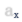
<style>
.page{position:relative;width:22px;height:22px;background:#ffffff}
.page>*{position:absolute;margin:0}
.t1{font:18px "SimSun-ExtB";color:#d3d3d3}
.t2{font:18px "SimSun-ExtB";color:#485572}
</style>
<div class="page">
<p class="t1" style="left:5px;top:7px;width:9px;height:9px">a</p>
<p class="t2" style="left:13px;top:13px;width:6px;height:5px">x</p>
</div>
